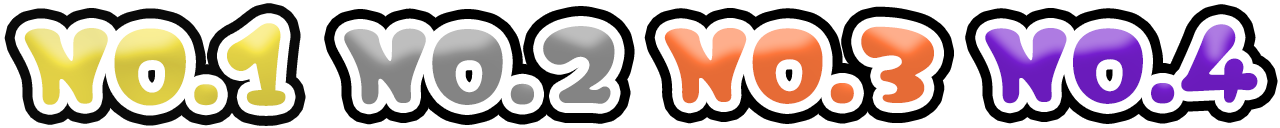
<style>
.page{position:relative;width:1280px;height:128px;background:#ffffff}
.page>*{position:absolute;margin:0}
.t1{font:103.4px "Memoir-Round";letter-spacing:-0.05em;font-weight:bold}
.t2{font:101.2px "Memoir-Round";letter-spacing:-0.05em;font-weight:bold}
</style>
<div class="page">
<p class="t1" style="left:24px;top:23px;width:262px;height:83px">NO.1</p>
<p class="t2" style="left:664px;top:26px;width:270px;height:78px">NO.3</p>
<p class="t2" style="left:985px;top:24px;width:273px;height:80px">NO.4</p>
</div>
